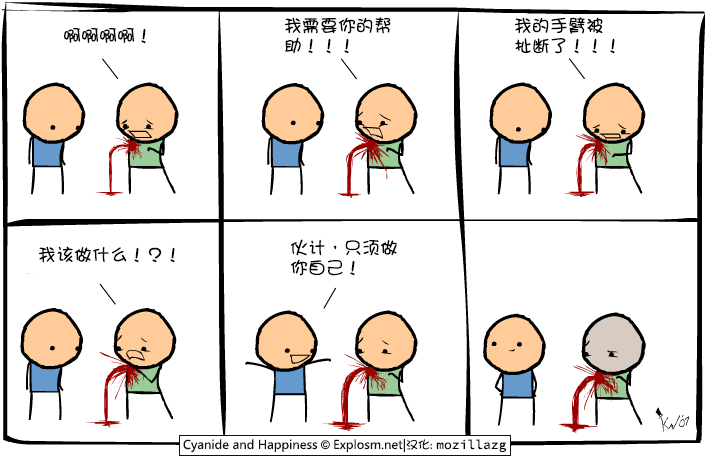
<style>
.page{position:relative;width:705px;height:456px;background:#ffffff}
.page>*{position:absolute;margin:0}
.t1{font:18px/20px "DFGirl";color:#000000}
.t2{font:18px "DFGirl";color:#000000}
</style>
<div class="page">
<p class="t1" style="left:284px;top:17px;width:107px;height:37px">我需要你的帮<br>助！！！</p>
<p class="t1" style="left:514px;top:17px;width:101px;height:37px">我的手臂被<br>扯断了！！！</p>
<p class="t2" style="left:64px;top:28px;width:82px;height:16px">啊啊啊啊！</p>
<p class="t2" style="left:38px;top:246px;width:137px;height:17px">我该做什么！？！</p>
<p class="t1" style="left:290px;top:239px;width:107px;height:37px">伙计，只须做<br>你自己！</p>
</div>
